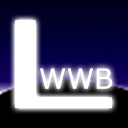
<style>
.page{position:relative;width:128px;height:128px}
.page>*{position:absolute;margin:0}
.t1{font:120.3px "Verdana";color:#ffffff;scale:1.75 1}
.t2{font:28px "Verdana";color:#ffffff}
</style>
<div class="page">
<p class="t1" style="left:15px;top:20px;width:97px;height:88px">L</p>
<p class="t2" style="left:40px;top:68px;width:73px;height:21px">WWB</p>
</div>
